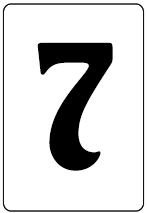
<style>
.page{position:relative;width:147px;height:213px;background:#ffffff}
.page>*{position:absolute;margin:0}
.t1{font:154.6px "HoboStd";color:#000000;scale:1.05 1}
</style>
<div class="page">
<p class="t1" style="left:37px;top:42px;width:76px;height:129px">7</p>
</div>
